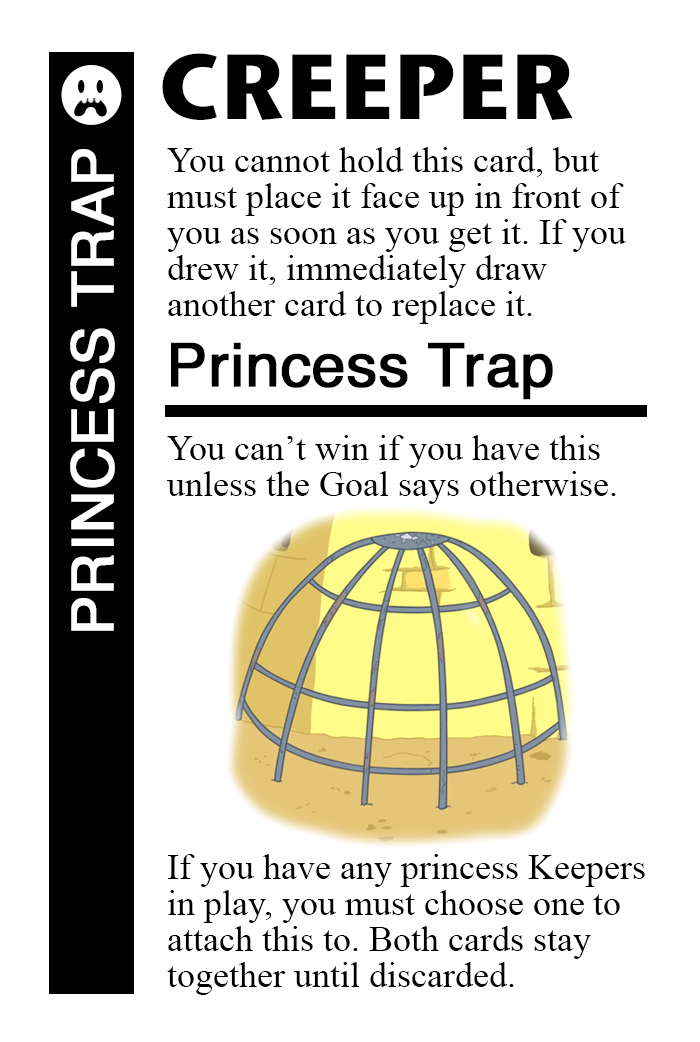
<style>
.page{position:relative;width:700px;height:1042px;background:#ffffff}
.page>*{position:absolute;margin:0}
.t1{font:92px "StoneSansITC-Bold";color:#000000}
.t2{font:58px "Helvetica";color:#ffffff;font-weight:bold}
.t3{font:36px/36px "TimesNewRomanPSMT";color:#000000}
.t4{font:60px "Helvetica";color:#000000;font-weight:bold}
</style>
<div class="page">
<p class="t1" style="left:162px;top:53px;width:411px;height:67px">CREEPER</p>
<p class="t2" style="left:70px;top:149px;width:45px;height:482px;rotate:-90deg">PRINCESS TRAP</p>
<p class="t3" style="left:167px;top:147px;width:459px;height:177px">You cannot hold this card, but<br>must place it face up in front of<br>you as soon as you get it. If you <br>drew it, immediately draw<br>another card to replace it.</p>
<p class="t4" style="left:171px;top:342px;width:382px;height:58px">Princess Trap</p>
<p class="t3" style="left:167px;top:435px;width:449px;height:69px">You can’t win if you have this <br>unless the Goal says otherwise.</p>
<p class="t3" style="left:167px;top:854px;width:478px;height:141px">If you have any princess Keepers<br>in play, you must choose one to<br>attach this to. Both cards stay<br>together until discarded.</p>
</div>
